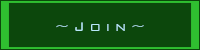
<style>
.page{position:relative;width:200px;height:50px;background:#0c470c}
.page>*{position:absolute;margin:0}
.t1{font:16.7px "BankGothicBT-Light";letter-spacing:0.28em;color:#b8e7f8}
</style>
<div class="page">
<p class="t1" style="left:56px;top:22px;width:88px;height:9px">~Join~</p>
</div>
